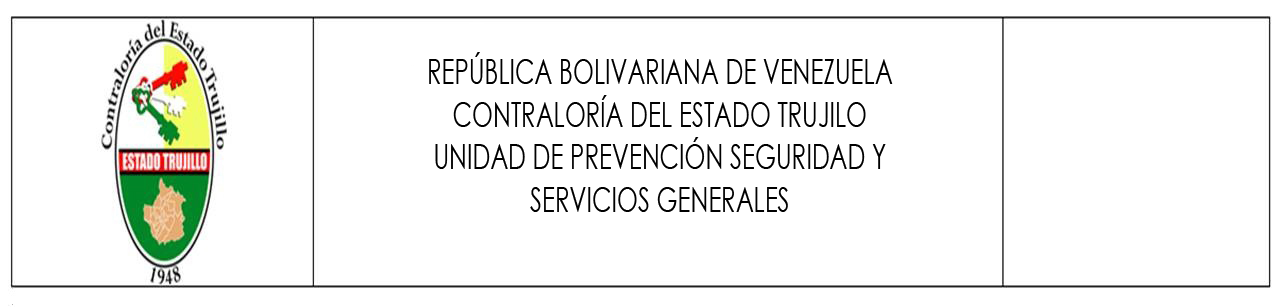
<style>
.page{position:relative;width:1277px;height:307px;background:#ffffff}
.page>*{position:absolute;margin:0}
.t1{font:35.4px "CenturyGothic";color:#000000;scale:0.68 1}
</style>
<div class="page">
<p class="t1" style="left:429px;top:52px;width:464px;height:160px;text-align:center">REPÚBLICA BOLIVARIANA DE VENEZUELA<br>CONTRALORÍA DEL ESTADO TRUJILO<br>UNIDAD DE PREVENCIÓN SEGURIDAD Y<br>SERVICIOS GENERALES</p>
</div>
